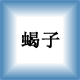
<style>
.page{position:relative;width:80px;height:80px;background:#ffffff}
.page>*{position:absolute;margin:0}
.t1{font:30px "SimSun";letter-spacing:0.015em;color:#000001;font-weight:bold;scale:1.1 1}
</style>
<div class="page">
<p class="t1" style="left:21px;top:31px;width:39px;height:18px">蝎子</p>
</div>
